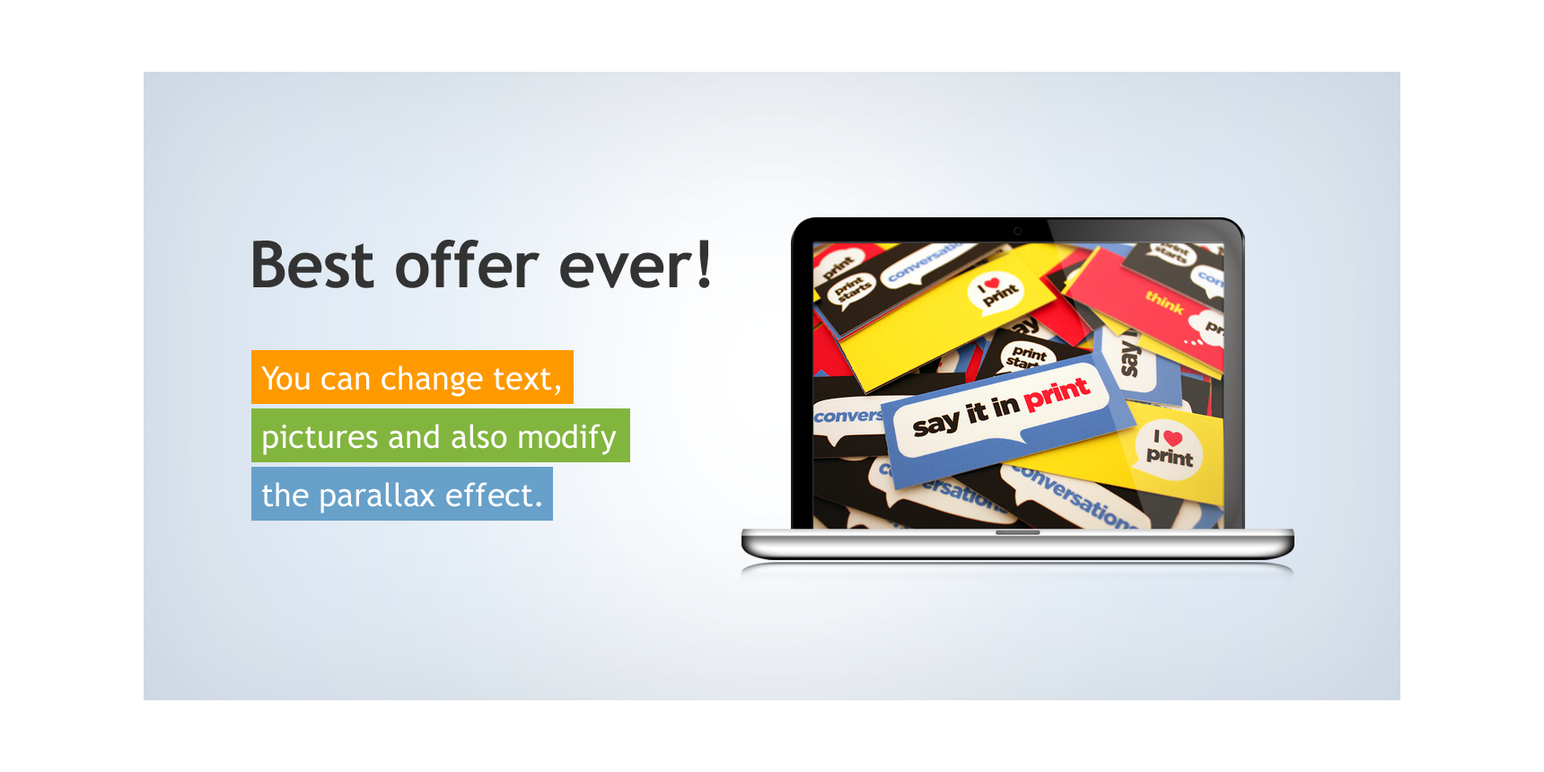
<style>
.page{position:relative;width:1544px;height:772px;background:#ffffff}
.page>*{position:absolute;margin:0}
.t1{font:64.6px "TrebuchetMS-Bold";letter-spacing:-0.01em;color:#333333}
.t2{font:32.3px "TrebuchetMS";color:#ffffff}
</style>
<div class="page">
<p class="t1" style="left:253px;top:240px;width:457px;height:48px">Best offer ever!</p>
<p class="t2" style="left:261px;top:365px;width:299px;height:32px">You can change text,</p>
<p class="t2" style="left:263px;top:424px;width:354px;height:31px">pictures and also modify</p>
<p class="t2" style="left:262px;top:482px;width:279px;height:32px">the parallax effect.</p>
</div>
